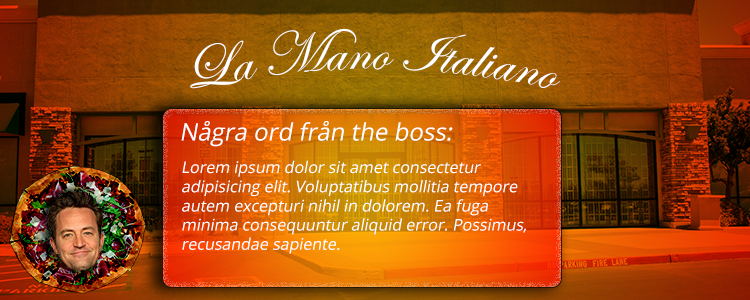
<style>
.page{position:relative;width:750px;height:300px}
.page>*{position:absolute;margin:0}
.t1{font:60px "EdwardianScriptITC";color:#ffffff}
.t2{font:24px "OpenSans";color:#ffffff;font-style:italic}
.t3{font:16px "OpenSans";color:#ffffff;font-style:italic}
</style>
<div class="page">
<p class="t1" style="left:190px;top:28px;width:371px;height:61px">La Mano Italiano</p>
<p class="t2" style="left:181px;top:121px;width:272px;height:26px">Några ord från the boss:</p>
<p class="t3" style="left:182px;top:160px;width:344px;height:94px">Lorem ipsum dolor sit amet consectetur <br>adipisicing elit. Voluptatibus mollitia tempore <br>autem excepturi nihil in dolorem. Ea fuga <br>minima consequuntur aliquid error. Possimus, <br>recusandae sapiente.</p>
</div>
